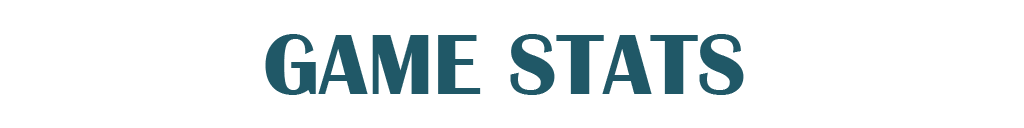
<style>
.page{position:relative;width:1024px;height:128px;background:#ffffff}
.page>*{position:absolute;margin:0}
.t1{font:89.3px "BritannicBold";color:#205867}
</style>
<div class="page">
<p class="t1" style="left:265px;top:34px;width:479px;height:61px">GAME STATS</p>
</div>
